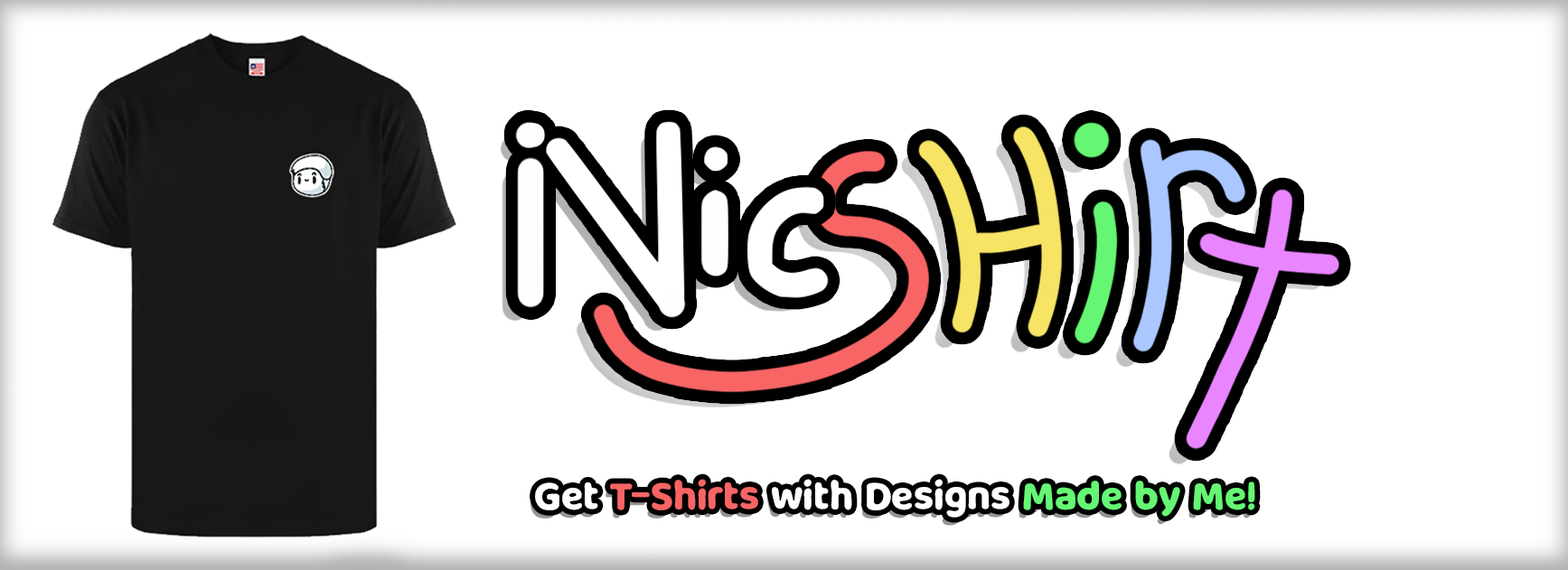
<style>
.page{position:relative;width:1568px;height:570px;background:#ffffff}
.page>*{position:absolute;margin:0}
.t1{font:38.2px "MilkyNiceClean";color:#ffffff}
.t2{font:38.2px "MilkyNiceClean";color:#f76565}
.t3{font:38.2px "MilkyNiceClean";color:#65f773}
</style>
<div class="page">
<p class="t1" style="left:535px;top:479px;width:720px;height:39px">Get <span class="t2">T-Shirts</span> with Designs <span class="t3">Made by Me!</span></p>
</div>
